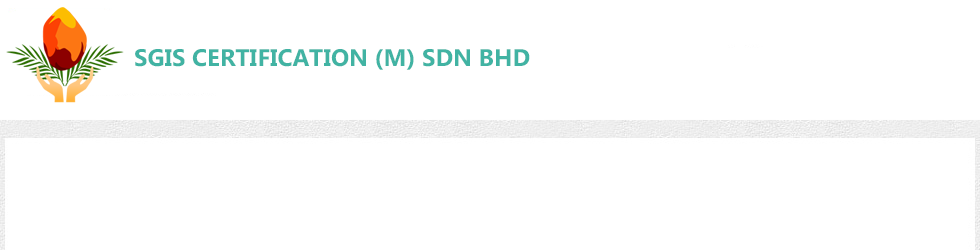
<style>
.page{position:relative;width:980px;height:250px;background:#ffffff}
.page>*{position:absolute;margin:0}
.t1{font:24px "MicrosoftPhagsPa-Bold";color:#41b3a3}
</style>
<div class="page">
<p class="t1" style="left:135px;top:49px;width:395px;height:21px">SGIS CERTIFICATION (M) SDN BHD</p>
</div>
